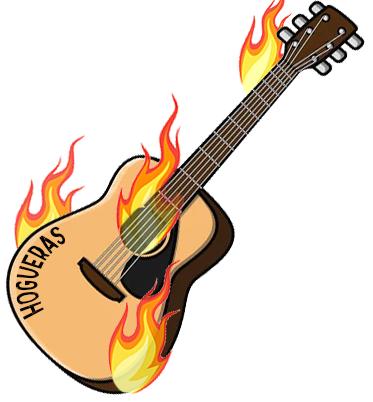
<style>
.page{position:relative;width:373px;height:402px;background:#ffffff}
.page>*{position:absolute;margin:0}
.t1{font:24.5px "FolknerStamp";letter-spacing:0.06em;color:#000000;scale:0.71 1}
</style>
<div class="page">
<p class="t1" style="left:15px;top:226px;width:51px;height:94px;rotate:-70deg">hogueras</p>
</div>
